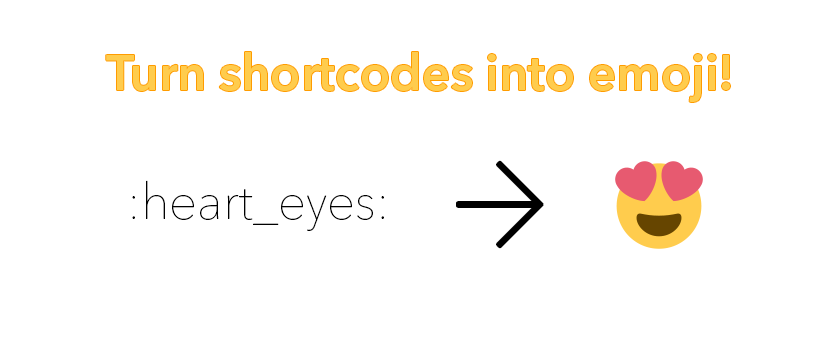
<style>
.page{position:relative;width:837px;height:348px;background:#ffffff}
.page>*{position:absolute;margin:0}
.t1{font:50px "AvenirNextLTPro-Demi";color:#ffcc4d}
.t2{font:50px "AvenirNextLTPro-UltLt";color:#000000}
</style>
<div class="page">
<p class="t1" style="left:106px;top:52px;width:624px;height:50px">Turn shortcodes into emoji!</p>
<p class="t2" style="left:132px;top:180px;width:252px;height:51px">:heart_eyes:</p>
</div>
